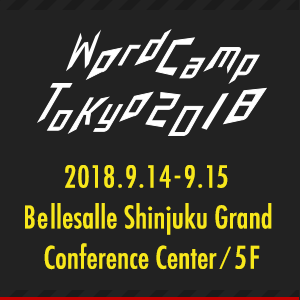
<style>
.page{position:relative;width:300px;height:300px;background:#222222}
.page>*{position:absolute;margin:0}
.t1{font:30.3px/40.4px "Futura-CondensedMedium";color:#f7e71b}
.t2{font:29.5px/55.2px "Futura-CondensedMedium";color:#f7e71b}
.t3{font:30.3px/26.9px "Futura-CondensedMedium";color:#f7e71b}
.t4{font:21.2px/26.9px "Futura-CondensedMedium";color:#f7e71b}
</style>
<div class="page">
<p class="t1" style="left:25px;top:165px;width:247px;height:105px;text-align:center"><span class="t2">2018.9.14-9.15 <br></span>Bellesalle Shinjuku Grand <br><span class="t3">Conference Center</span><span class="t4">/</span><span class="t3">5F</span></p>
</div>
